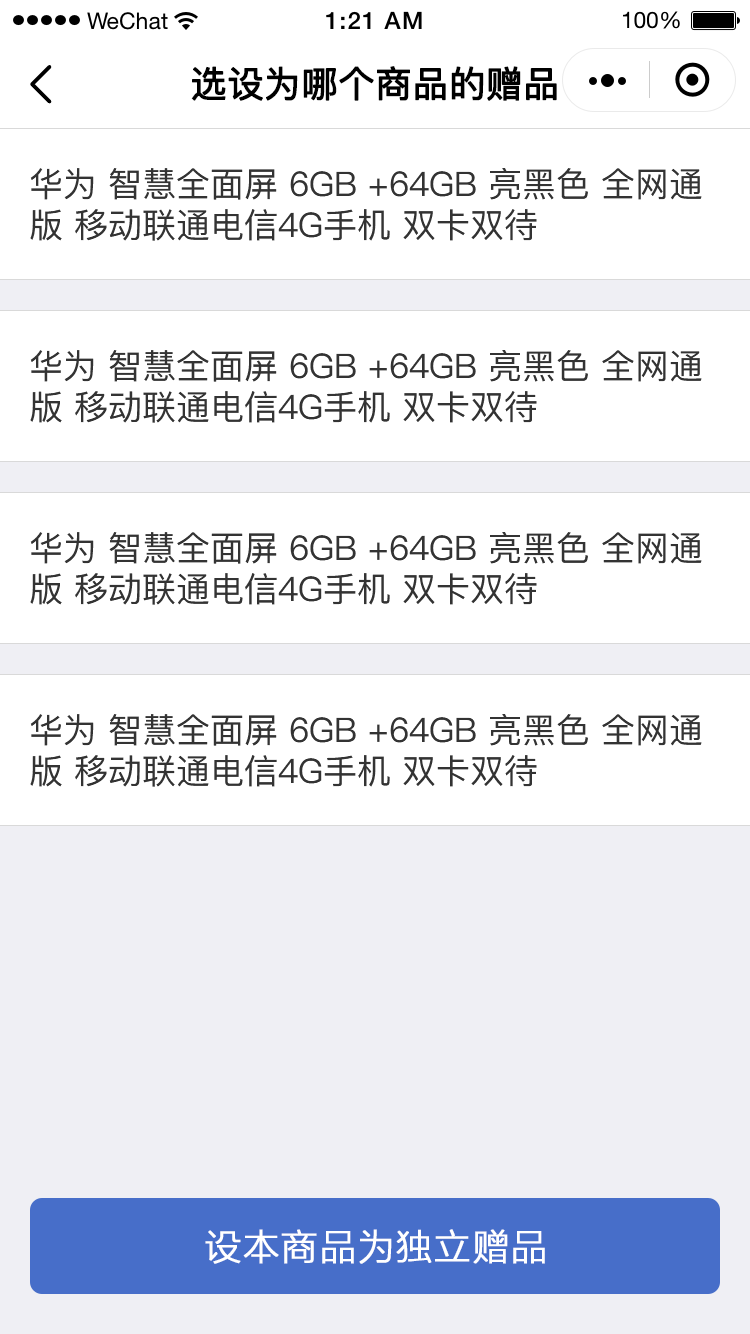
<style>
.page{position:relative;width:750px;height:1334px;background:#ffffff}
.page>*{position:absolute;margin:0}
.t1{font:36px "PingFang-SC-Medium";color:#000000;font-weight:bold}
.t2{font:34px "PingFang-SC-Medium";color:#333333}
.t3{font:36px "STHeitiSC-Medium";color:#ffffff;font-weight:bold}
</style>
<div class="page">
<p class="t1" style="left:191px;top:66px;width:366px;height:35px">选设为哪个商品的赠品</p>
<p class="t2" style="left:30px;top:168px;width:672px;height:73px">华为 智慧全面屏 6GB +64GB 亮黑色 全网通<br>版 移动联通电信4G手机 双卡双待</p>
<p class="t2" style="left:30px;top:350px;width:672px;height:73px">华为 智慧全面屏 6GB +64GB 亮黑色 全网通<br>版 移动联通电信4G手机 双卡双待</p>
<p class="t2" style="left:30px;top:532px;width:672px;height:73px">华为 智慧全面屏 6GB +64GB 亮黑色 全网通<br>版 移动联通电信4G手机 双卡双待</p>
<p class="t2" style="left:30px;top:714px;width:672px;height:73px">华为 智慧全面屏 6GB +64GB 亮黑色 全网通<br>版 移动联通电信4G手机 双卡双待</p>
<p class="t3" style="left:205px;top:1229px;width:340px;height:35px">设本商品为独立赠品</p>
</div>
